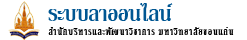
<style>
.page{position:relative;width:247px;height:40px;background:#ffffff}
.page>*{position:absolute;margin:0}
.t1{font:30px "KodchiangUPCBold";color:#005692}
.t2{font:14px "KodchiangUPC";color:#000000}
</style>
<div class="page">
<p class="t1" style="left:48px;top:3px;width:125px;height:18px">ระบบลาออนไลน์</p>
<p class="t2" style="left:48px;top:27px;width:186px;height:8px">สำนักบริหารและพัฒนาวิชาการ มหาวิทยาลัยขอนแก่น</p>
</div>
